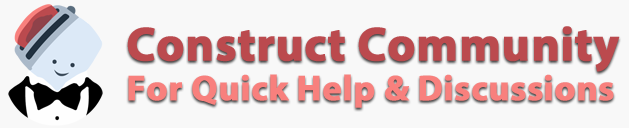
<style>
.page{position:relative;width:629px;height:128px;background:#f8f8f8}
.page>*{position:absolute;margin:0}
.t1{font:36px/40px "MyriadPro-Bold";color:#f8807d;font-weight:bold}
.t2{font:48px/40px "MyriadPro-Bold";color:#bb4a4e;font-weight:bold}
</style>
<div class="page">
<p class="t1" style="left:127px;top:26px;width:493px;height:82px"><span class="t2">Construct Community<br></span>For Quick Help &amp; Discussions</p>
</div>
